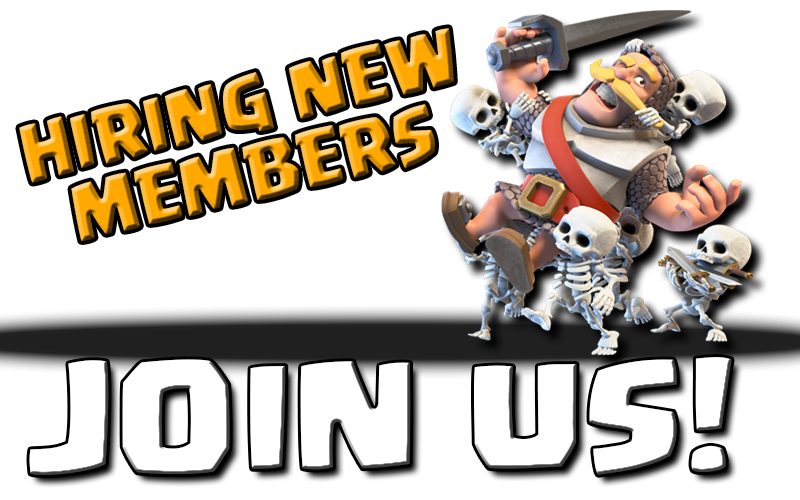
<style>
.page{position:relative;width:800px;height:500px;background:#ffffff}
.page>*{position:absolute;margin:0}
.t1{font:57.6px "Supercell-Magic";scale:0.92 1}
.t2{font:114.6px "Supercell-Magic";color:#ffffff;scale:1.05 1}
</style>
<div class="page">
<p class="t1" style="left:19px;top:28px;width:435px;height:213px;text-align:center;rotate:-13deg">HIRING NEW<br>MEMBERS</p>
<p class="t2" style="left:29px;top:357px;width:703px;height:118px">JOIN US!</p>
</div>
